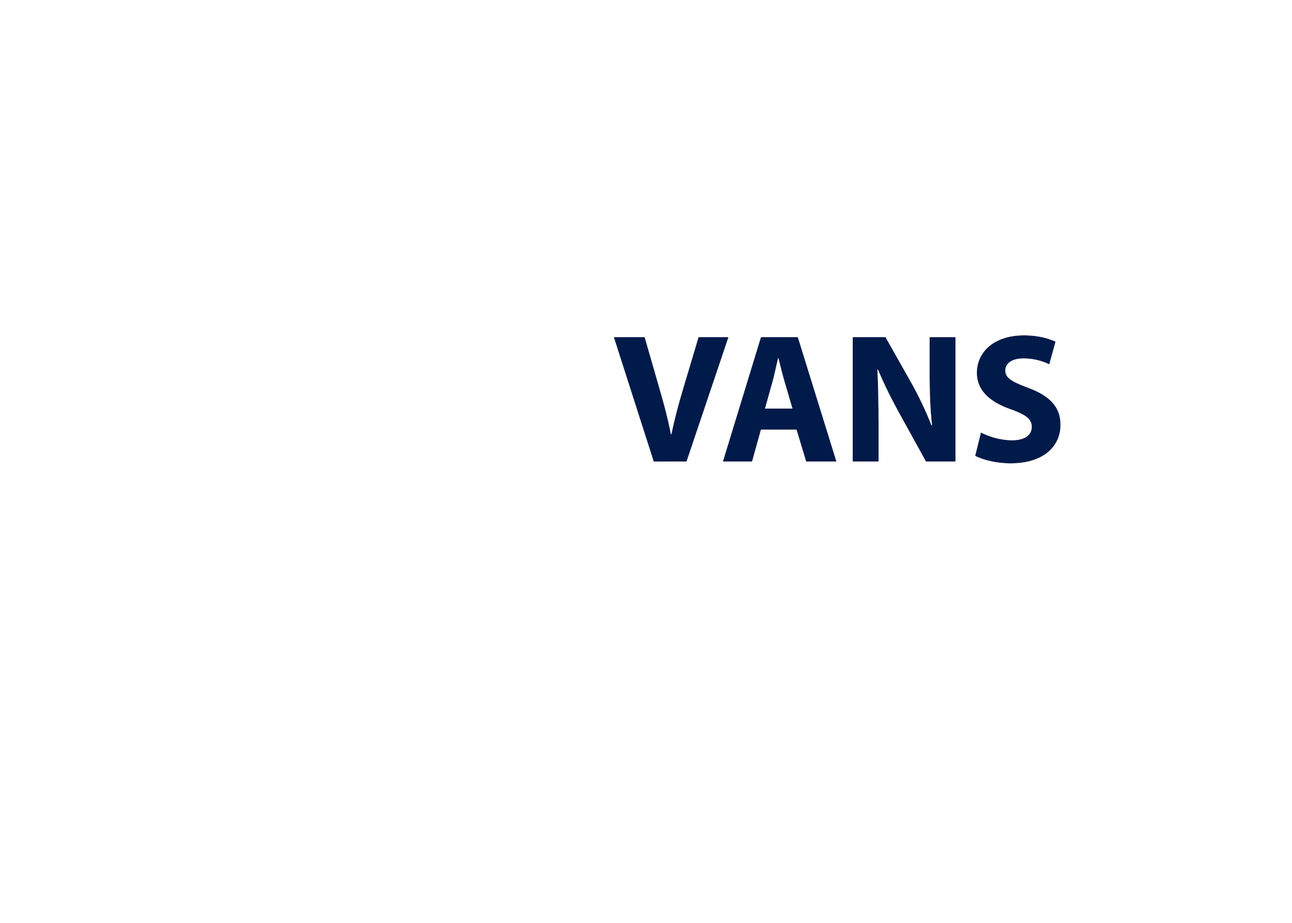
<style>
.page{position:relative;width:1292px;height:923px;background:#ffffff}
.page>*{position:absolute;margin:0}
.t1{font:184.6px "MyriadPro-Bold";color:#001a4a}
</style>
<div class="page">
<p class="t1" style="left:613px;top:335px;width:448px;height:128px">VANS</p>
</div>
